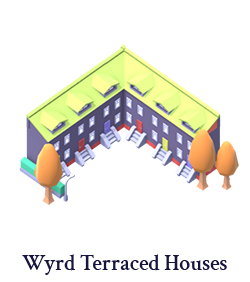
<style>
.page{position:relative;width:250px;height:282px;background:#ffffff}
.page>*{position:absolute;margin:0}
.t1{font:22px "CrimsonText-SemiBold";color:#15153e}
</style>
<div class="page">
<p class="t1" style="left:22px;top:254px;width:205px;height:21px">Wyrd Terraced Houses</p>
</div>
